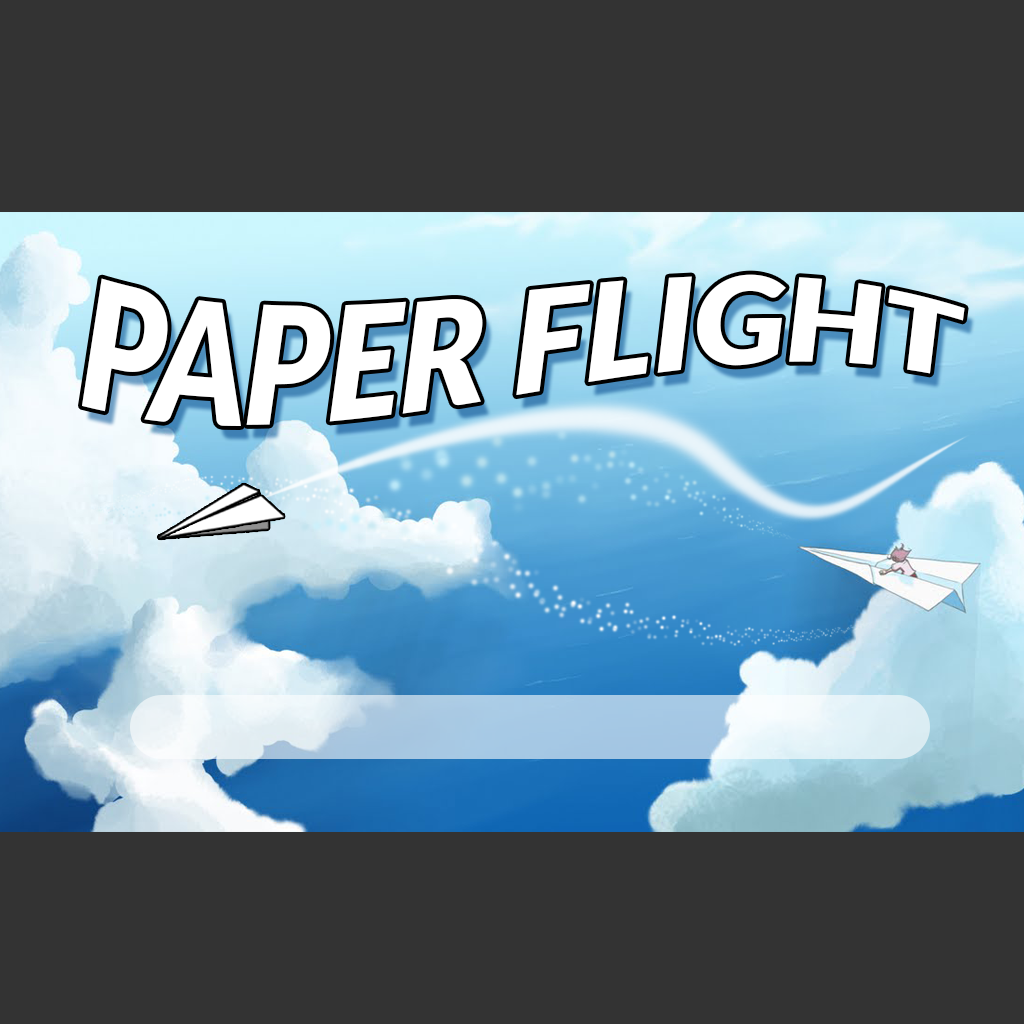
<style>
.page{position:relative;width:1024px;height:1024px;background:#333333}
.page>*{position:absolute;margin:0}
.t1{font:140px "Lato-BlackItalic";color:#ffffff}
</style>
<div class="page">
<p class="t1" style="left:82px;top:274px;width:883px;height:152px">PAPER FLIGHT</p>
</div>
